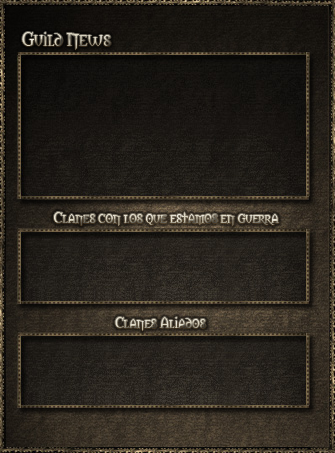
<style>
.page{position:relative;width:335px;height:453px}
.page>*{position:absolute;margin:0}
.t1{font:18px "Morpheus"}
.t2{font:14px "Morpheus"}
</style>
<div class="page">
<p class="t1" style="left:22px;top:32px;width:89px;height:18px">Guild News</p>
<p class="t2" style="left:54px;top:212px;width:225px;height:14px">Clanes con los que estamos en guerra</p>
<p class="t2" style="left:115px;top:317px;width:91px;height:14px">Clanes Aliados</p>
</div>
